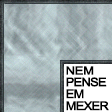
<style>
.page{position:relative;width:112px;height:112px}
.page>*{position:absolute;margin:0}
.t1{font:11.8px "ArialMT";letter-spacing:-0.115em;color:#000000;text-transform:uppercase;font-weight:bold;scale:1.09 1}
.t2{font:11.3px "ArialMT";letter-spacing:-0.075em;color:#000000;text-transform:uppercase;font-weight:bold;scale:1.14 1}
</style>
<div class="page">
<p class="t1" style="left:66px;top:77px;width:41px;height:10px">PENSE</p>
<p class="t2" style="left:66px;top:66px;width:28px;height:9px">NEM</p>
<p class="t1" style="left:66px;top:89px;width:18px;height:10px">EM</p>
<p class="t1" style="left:66px;top:101px;width:43px;height:10px">MEXER</p>
</div>
